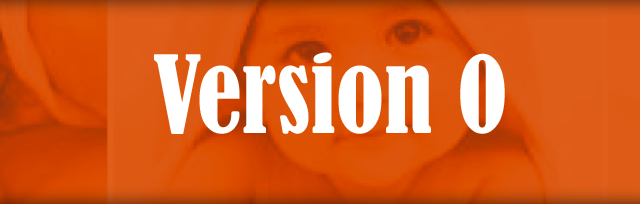
<style>
.page{position:relative;width:640px;height:204px}
.page>*{position:absolute;margin:0}
.t1{font:100px "BernardMT-Condensed";color:#ffffff}
</style>
<div class="page">
<p class="t1" style="left:154px;top:52px;width:351px;height:82px">Version 0</p>
</div>
